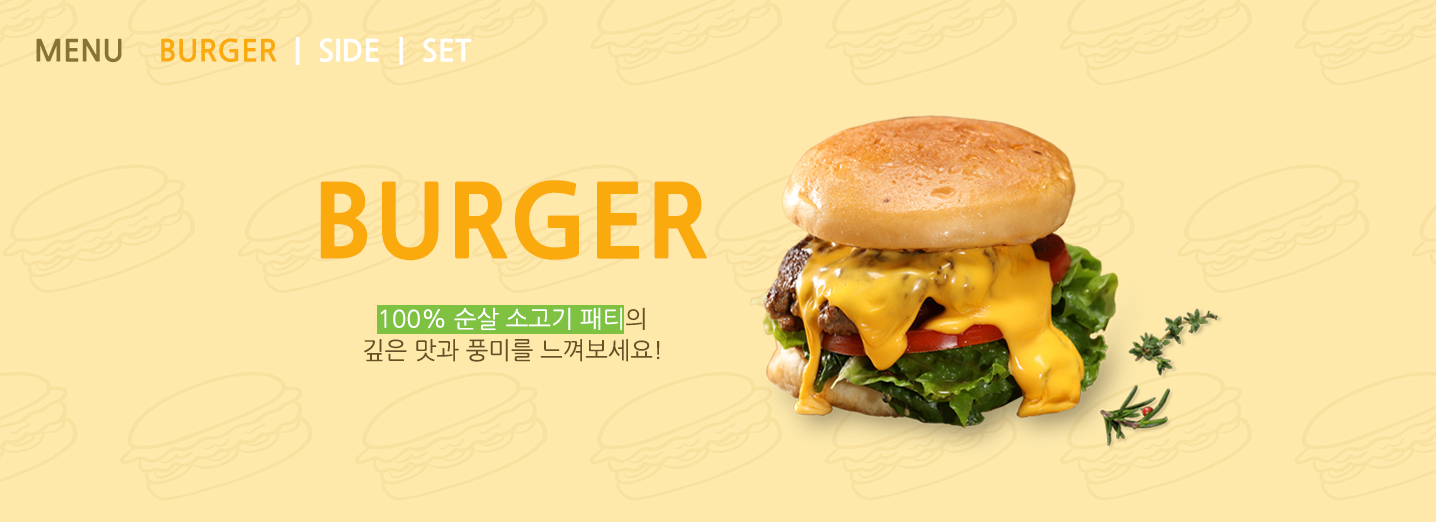
<style>
.page{position:relative;width:1436px;height:522px;background:#fee9ab}
.page>*{position:absolute;margin:0}
.t1{font:30px "NanumGothicBold";color:#877334}
.t2{font:100px "NanumGothicExtraBold";color:#fbaa0d}
.t3{font:24px/31.4px "NanumGothic";color:#655224}
.t4{font:24px/31.4px "NanumGothic";color:#ffffff}
</style>
<div class="page">
<p class="t1" style="left:36px;top:38px;width:86px;height:25px">MENU</p>
<p class="t2" style="left:320px;top:180px;width:387px;height:81px">BURGER</p>
<p class="t3" style="left:364px;top:307px;width:296px;height:55px;text-align:center"><span class="t4">100% 순살 소고기 패티</span>의<br>깊은 맛과 풍미를 느껴보세요!</p>
</div>
